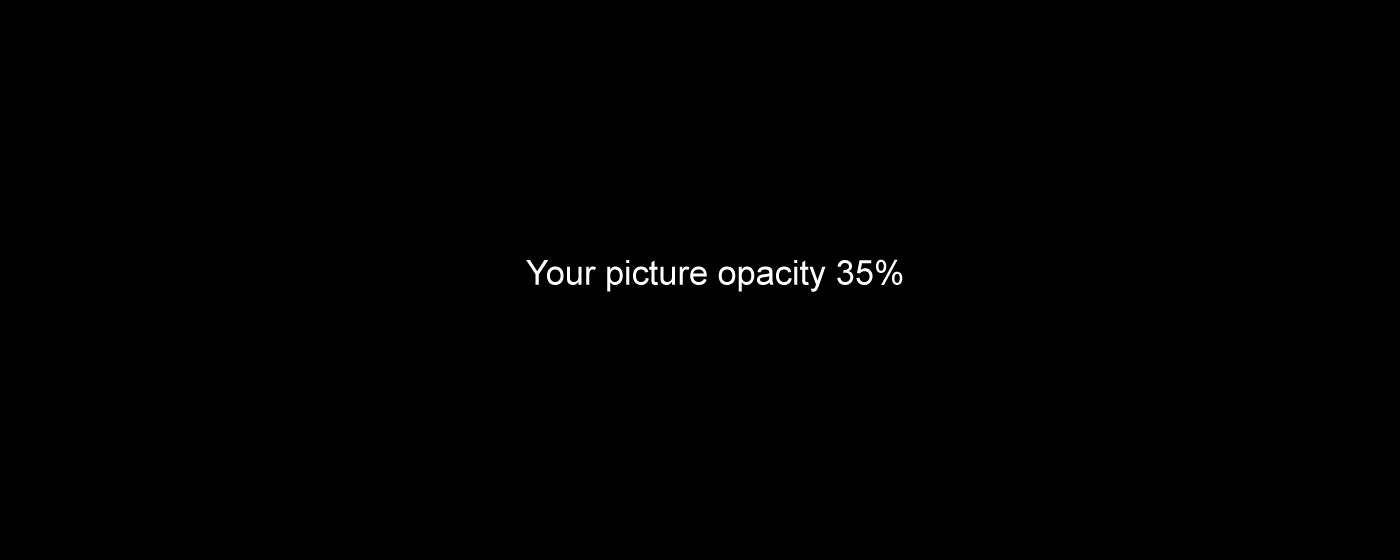
<style>
.page{position:relative;width:1400px;height:560px;background:#000000}
.page>*{position:absolute;margin:0}
.t1{font:34.5px "ArialMT";color:#ffffff}
</style>
<div class="page">
<p class="t1" style="left:526px;top:259px;width:377px;height:33px">Your picture opacity 35%</p>
</div>
